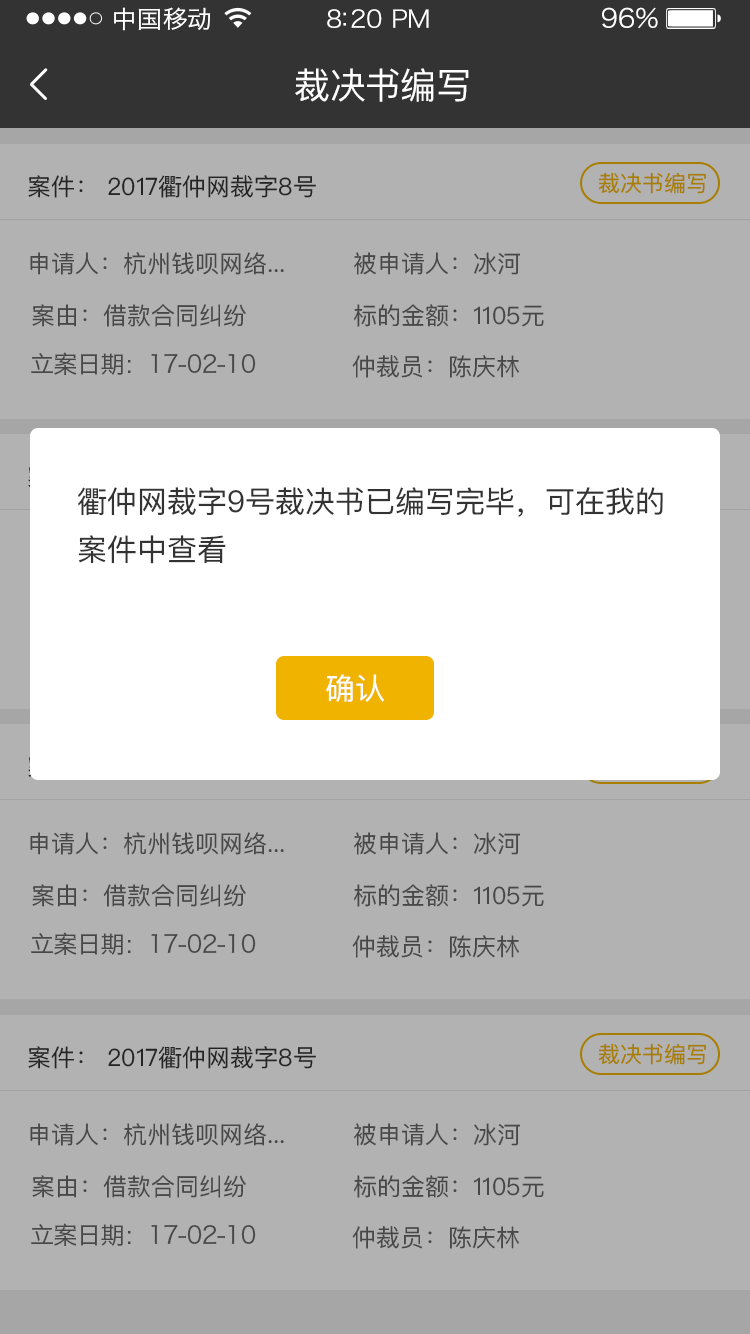
<style>
.page{position:relative;width:750px;height:1334px;background:#b2b2b2}
.page>*{position:absolute;margin:0}
.t1{font:24px "HiraginoSansGB-W3";letter-spacing:0.02em;color:#ffffff;scale:1.03 1}
.t2{font:24px "HiraginoSansGB-W3";letter-spacing:-0.02em;color:#ffffff;scale:1.03 1}
.t3{font:26.2px "HiraginoSansGB-W3";letter-spacing:-0.02em;color:#ffffff;scale:1.03 1}
.t4{font:36px "PingFangSC-Regular";letter-spacing:-0.02em;color:#ffffff}
.t5{font:22px "PingFangSC-Regular";color:#a87d00}
.t6{font:24px "PingFangSC-Regular";color:#333333}
.t7{font:24px "PingFangSC-Regular";color:#474747}
.t8{font:24px "HiraginoSansGB-W3";letter-spacing:-0.02em;color:#474747}
.t9{font:30px/48px "PingFangSC-Regular";color:#333333}
.t10{font:30px "PingFangSC-Regular";color:#ffffff}
</style>
<div class="page">
<p class="t1" style="left:114px;top:7px;width:97px;height:24px">中国移动</p>
<p class="t2" style="left:327px;top:9px;width:102px;height:19px">8:20 PM</p>
<p class="t3" style="left:602px;top:7px;width:56px;height:22px">96%</p>
<p class="t4" style="left:295px;top:68px;width:174px;height:34px">裁决书编写</p>
<p class="t5" style="left:598px;top:172px;width:108px;height:22px">裁决书编写</p>
<p class="t6" style="left:28px;top:175px;width:288px;height:23px">案件： 2017衢仲网裁字8号</p>
<p class="t7" style="left:30px;top:252px;width:254px;height:23px">申请人：杭州钱呗网络...</p>
<p class="t7" style="left:354px;top:252px;width:166px;height:23px">被申请人：冰河</p>
<p class="t7" style="left:32px;top:304px;width:214px;height:23px">案由：借款合同纠纷</p>
<p class="t7" style="left:354px;top:304px;width:190px;height:23px">标的金额：1105元</p>
<p class="t8" style="left:31px;top:352px;width:225px;height:23px">立案日期：17-02-10</p>
<p class="t7" style="left:352px;top:355px;width:167px;height:23px">仲裁员：陈庆林</p>
<p class="t9" style="left:78px;top:487px;width:585px;height:77px">衢仲网裁字9号裁决书已编写完毕，可在我的<br>案件中查看</p>
<p class="t10" style="left:326px;top:674px;width:58px;height:28px">确认</p>
<p class="t7" style="left:30px;top:832px;width:254px;height:23px">申请人：杭州钱呗网络...</p>
<p class="t7" style="left:354px;top:832px;width:166px;height:23px">被申请人：冰河</p>
<p class="t7" style="left:32px;top:884px;width:214px;height:23px">案由：借款合同纠纷</p>
<p class="t7" style="left:354px;top:884px;width:190px;height:23px">标的金额：1105元</p>
<p class="t8" style="left:31px;top:932px;width:225px;height:23px">立案日期：17-02-10</p>
<p class="t7" style="left:352px;top:935px;width:167px;height:23px">仲裁员：陈庆林</p>
<p class="t6" style="left:28px;top:1046px;width:288px;height:23px">案件： 2017衢仲网裁字8号</p>
<p class="t5" style="left:598px;top:1043px;width:108px;height:22px">裁决书编写</p>
<p class="t7" style="left:30px;top:1123px;width:254px;height:23px">申请人：杭州钱呗网络...</p>
<p class="t7" style="left:354px;top:1123px;width:166px;height:23px">被申请人：冰河</p>
<p class="t7" style="left:32px;top:1175px;width:214px;height:23px">案由：借款合同纠纷</p>
<p class="t7" style="left:354px;top:1175px;width:190px;height:23px">标的金额：1105元</p>
<p class="t8" style="left:31px;top:1223px;width:225px;height:23px">立案日期：17-02-10</p>
<p class="t7" style="left:352px;top:1226px;width:167px;height:23px">仲裁员：陈庆林</p>
</div>
